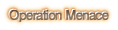
<style>
.page{position:relative;width:118px;height:30px;background:#ffffff}
.page>*{position:absolute;margin:0}
.t1{font:13px "FutoGoB101Pr5-Bold";letter-spacing:-0.08em;font-weight:bold}
.t2{font:13px "FutoGoB101Pr5-Bold";letter-spacing:-0.08em;color:#88725a;font-weight:bold}
</style>
<div class="page">
<p class="t1" style="left:8px;top:8px;width:100px;height:13px">Operation Menace</p>
<p class="t2" style="left:9px;top:9px;width:100px;height:13px">Operation Menace</p>
</div>
